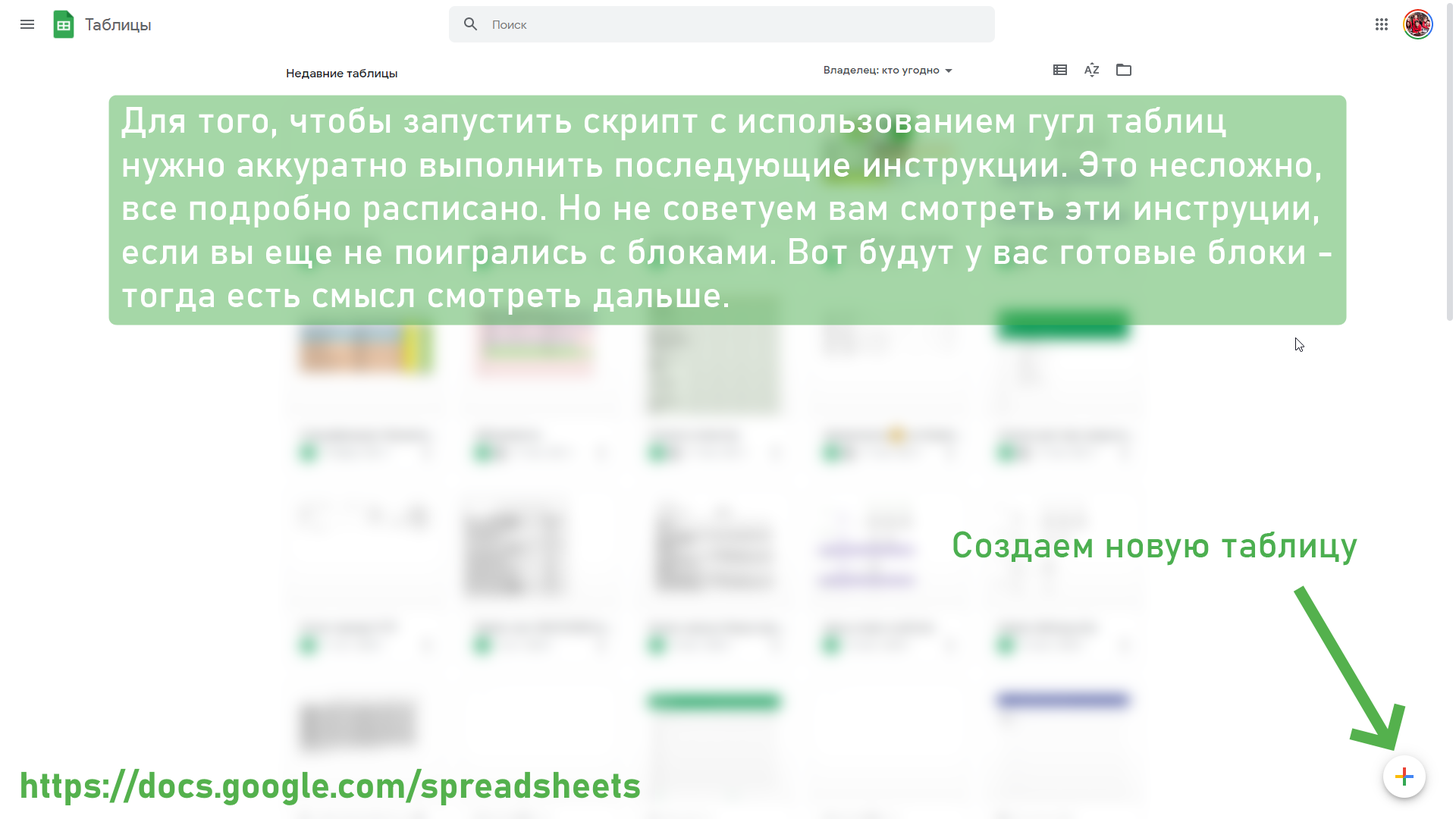
<style>
.page{position:relative;width:1456px;height:819px;background:#ffffff}
.page>*{position:absolute;margin:0}
.t1{font:36.4px "Bahnschrift";color:#ffffff}
.t2{font:36.4px "Bahnschrift";color:#4caf50}
</style>
<div class="page">
<p class="t1" style="left:121px;top:107px;width:1211px;height:208px">Для того, чтобы запустить скрипт с использованием гугл таблиц<br>нужно аккуратно выполнить последующие инструкции. Это несложно,<br>все подробно расписано. Но не советуем вам смотреть эти инструции,<br>если вы еще не поигрались с блоками. Вот будут у вас готовые блоки - <br>тогда есть смысл смотреть дальше.</p>
<p class="t2" style="left:953px;top:531px;width:404px;height:35px">Создаем новую таблицу</p>
</div>
